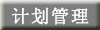
<style>
.page{position:relative;width:100px;height:30px;background:#7d7d7d}
.page>*{position:absolute;margin:0}
.t1{font:18px "NSimSun";letter-spacing:0.1em;color:#ffffff;font-weight:bold}
</style>
<div class="page">
<p class="t1" style="left:11px;top:7px;width:78px;height:18px">计划管理</p>
</div>
